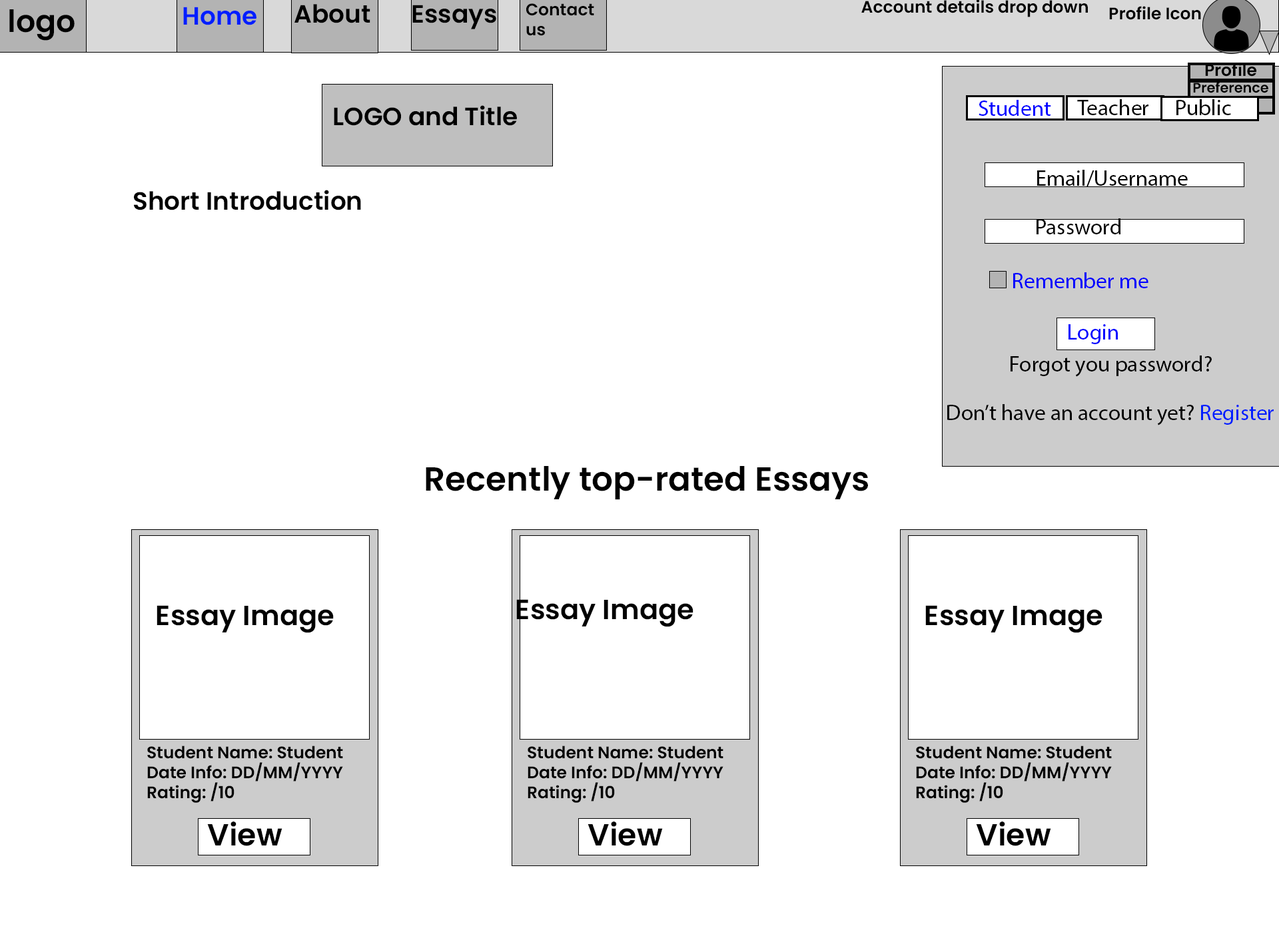
<style>
.page{position:relative;width:1279px;height:932px;background:#ffffff}
.page>*{position:absolute;margin:0}
.t1{font:25px "Poppins-SemiBold";color:#000000}
.t2{font:16.7px "Poppins-SemiBold";color:#000000}
.t3{font:30.5px "Poppins-SemiBold";color:#000000}
.t4{font:25px "Poppins-SemiBold";color:#001eff}
.t5{font:13.9px "Poppins-SemiBold";color:#000000}
.t6{font:22.2px "MyriadPro-Regular";color:#0000ff}
.t7{font:22.2px "MyriadPro-Regular";color:#000000}
.t8{font:22.2px "MyriadPro-Regular";color:#001eff}
.t9{font:33.3px "Poppins-SemiBold";color:#000000}
.t10{font:27.8px "Poppins-SemiBold";color:#000000}
</style>
<div class="page">
<p class="t1" style="left:294px;top:4px;width:76px;height:19px">About</p>
<p class="t1" style="left:412px;top:5px;width:84px;height:24px">Essays</p>
<p class="t2" style="left:526px;top:3px;width:68px;height:33px">Contact us</p>
<p class="t2" style="left:861px;top:0px;width:227px;height:17px">Account details drop down</p>
<p class="t2" style="left:1109px;top:6px;width:92px;height:14px">Profile Icon</p>
<p class="t3" style="left:9px;top:9px;width:66px;height:32px">logo</p>
<p class="t4" style="left:183px;top:7px;width:73px;height:18px">Home</p>
<p class="t2" style="left:1205px;top:63px;width:51px;height:14px">Profile</p>
<p class="t5" style="left:1193px;top:81px;width:75px;height:12px">Preference</p>
<p class="t6" style="left:978px;top:100px;width:73px;height:16px">Student</p>
<p class="t7" style="left:1077px;top:99px;width:71px;height:16px">Teacher</p>
<p class="t7" style="left:1176px;top:99px;width:55px;height:16px">Public</p>
<p class="t1" style="left:334px;top:105px;width:183px;height:21px">LOGO and Title</p>
<p class="t7" style="left:1037px;top:170px;width:151px;height:17px">Email/Username</p>
<p class="t1" style="left:134px;top:190px;width:227px;height:20px">Short Introduction</p>
<p class="t7" style="left:1036px;top:218px;width:84px;height:16px">Password</p>
<p class="t6" style="left:1013px;top:272px;width:135px;height:16px">Remember me</p>
<p class="t6" style="left:1068px;top:324px;width:50px;height:20px">Login</p>
<p class="t7" style="left:1010px;top:356px;width:202px;height:21px">Forgot you password?</p>
<p class="t7" style="left:947px;top:404px;width:326px;height:22px">Don’t have an account yet? <span class="t8">Register</span></p>
<p class="t9" style="left:426px;top:466px;width:442px;height:34px">Recently top-rated Essays</p>
<p class="t10" style="left:157px;top:605px;width:177px;height:28px">Essay Image</p>
<p class="t10" style="left:516px;top:599px;width:177px;height:28px">Essay Image</p>
<p class="t10" style="left:925px;top:605px;width:177px;height:28px">Essay Image</p>
<p class="t2" style="left:147px;top:746px;width:196px;height:57px">Student Name: Student <br>Date Info: DD/MM/YYYY<br>Rating: /10</p>
<p class="t2" style="left:528px;top:746px;width:195px;height:57px">Student Name: Student <br>Date Info: DD/MM/YYYY<br>Rating: /10</p>
<p class="t2" style="left:916px;top:746px;width:196px;height:57px">Student Name: Student <br>Date Info: DD/MM/YYYY<br>Rating: /10</p>
<p class="t3" style="left:207px;top:822px;width:75px;height:25px">View</p>
<p class="t3" style="left:587px;top:822px;width:76px;height:25px">View</p>
<p class="t3" style="left:976px;top:822px;width:75px;height:25px">View</p>
</div>
